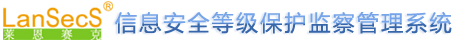
<style>
.page{position:relative;width:475px;height:42px;background:#ffffff}
.page>*{position:absolute;margin:0}
.t1{font:22px "MicrosoftYaHei";letter-spacing:0.1em}
</style>
<div class="page">
<p class="t1" style="left:115px;top:11px;width:337px;height:23px">信息安全等级保护监察管理系统</p>
</div>
